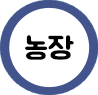
<style>
.page{position:relative;width:98px;height:95px;background:#ffffff}
.page>*{position:absolute;margin:0}
.t1{font:30px "BMJUA";color:#000000}
</style>
<div class="page">
<p class="t1" style="left:25px;top:35px;width:49px;height:25px">농장</p>
</div>
